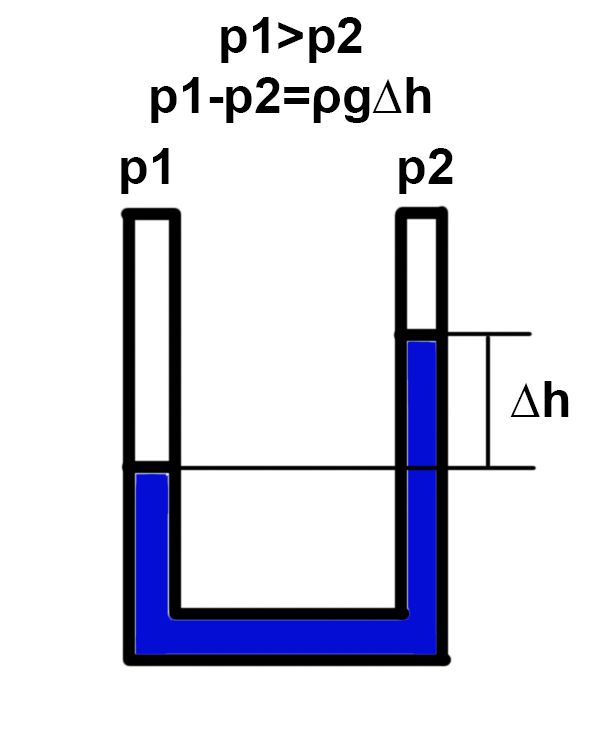
<style>
.page{position:relative;width:600px;height:748px;background:#ffffff}
.page>*{position:absolute;margin:0}
.t1{font:12px "Arial-BoldMT";color:#000000}
.t2{font:50px "Arial-BoldMT";color:#000000}
</style>
<div class="page">
<p class="t1" style="left:151px;top:17px;width:280px;height:106px;text-align:center">p1&gt;p2<br>p1-p2=ρg∆h</p>
<p class="t1" style="left:121px;top:148px;width:48px;height:46px">p1</p>
<p class="t1" style="left:399px;top:148px;width:54px;height:46px">p2</p>
<p class="t2" style="left:510px;top:381px;width:59px;height:36px">∆h</p>
</div>
